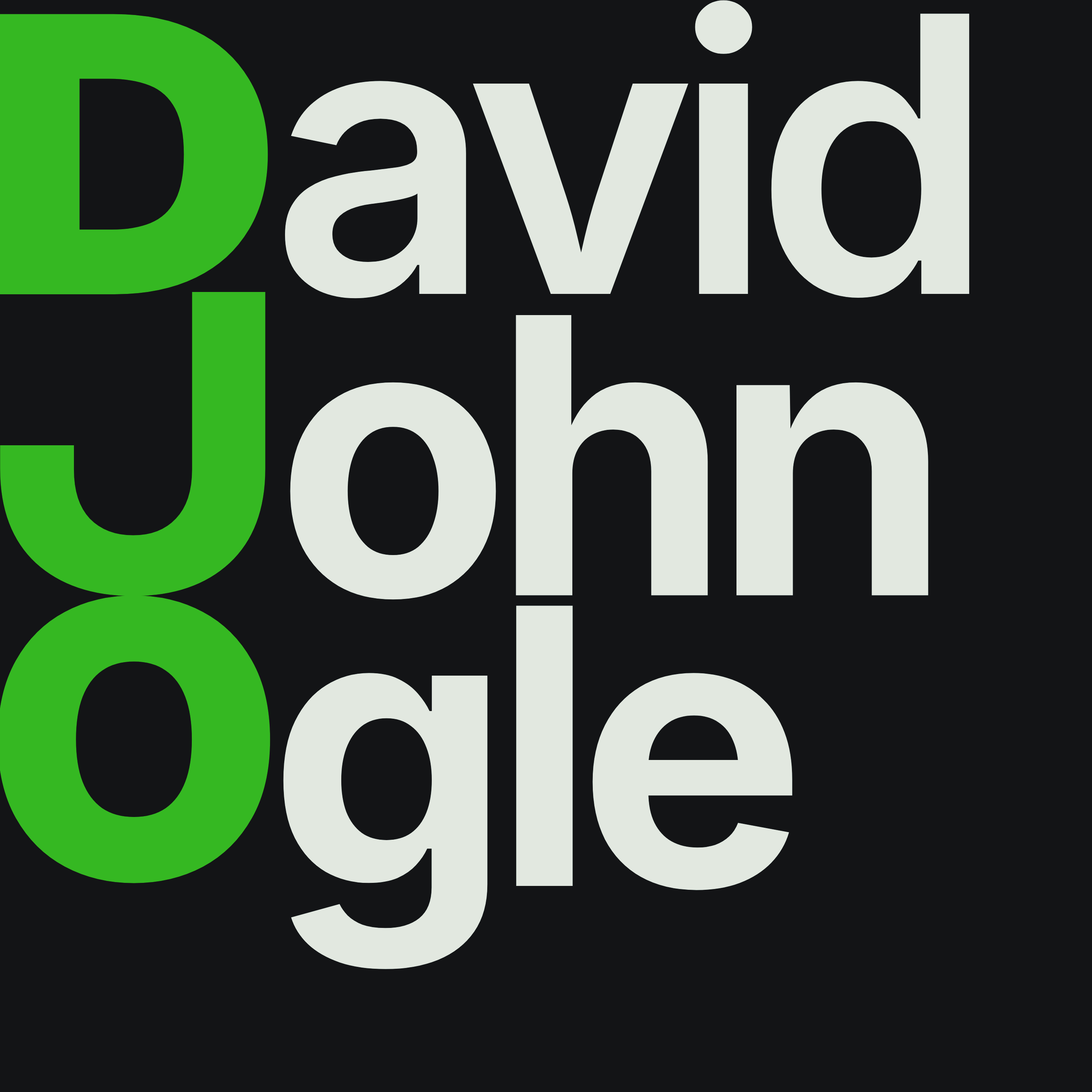
<style>
.page{position:relative;width:1092px;height:1092px;background:#131416}
.page>*{position:absolute;margin:0}
.t1{font:385.2px "Inter-SemiBold";letter-spacing:-0.05em;color:#dedcd7}
.t2{font:385.2px "Inter-SemiBold_14.000opsz_650.000wght";letter-spacing:-0.05em;color:#dedcd7}
.t3{font:385.2px "Inter-SemiBold_14.000opsz_700.000wght";letter-spacing:-0.05em;color:#dedcd7}
</style>
<div class="page">
<p class="t1" style="left:285px;top:0px;width:684px;height:299px">a<span class="t2">v</span>id</p>
<p class="t3" style="left:290px;top:315px;width:638px;height:285px">ohn</p>
<p class="t3" style="left:283px;top:606px;width:509px;height:363px">gle</p>
</div>
